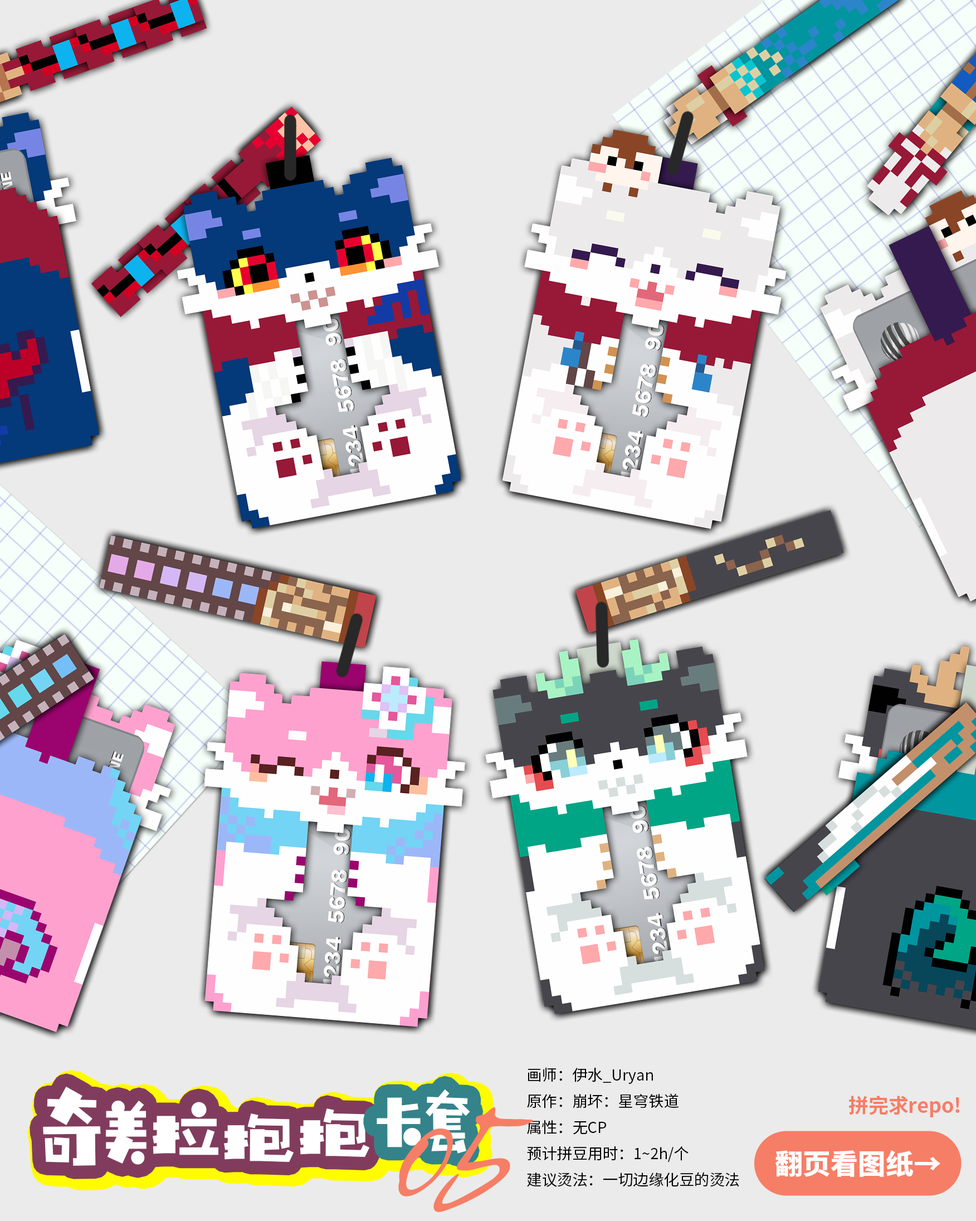
<style>
.page{position:relative;width:976px;height:1221px;background:#ebebeb}
.page>*{position:absolute;margin:0}
.t1{font:15.3px/26.1px "SourceHanSansCN-Regular";color:#000000}
.t2{font:87.6px "HYZhuZiTongNianTiW";color:#ffffff}
.t3{font:97.2px "HYZhuZiTongNianTiW";color:#ffffff}
.t4{font:86.1px "HYZhuZiTongNianTiW";color:#ffffff}
.t5{font:75.7px "HYZhuZiTongNianTiW";color:#ffffff}
.t6{font:20px "SourceHanSansCN-Bold";color:#f67e66}
.t7{font:127.8px "AllisonTessa-ExtraexpandedExtra";letter-spacing:-0.1em;color:#f67e66}
.t8{font:158.2px "AllisonTessa-ExtraexpandedExtra";letter-spacing:-0.1em;color:#f67e66}
.t9{font:27.7px "SourceHanSansCN-Heavy";color:#fffefe}
</style>
<div class="page">
<p class="t1" style="left:527px;top:1067px;width:213px;height:120px">画师：伊水_Uryan<br>原作：崩坏：星穹铁道<br>属性：无CP<br>预计拼豆用时：1~2h/个<br>建议烫法：一切边缘化豆的烫法</p>
<p class="t2" style="left:43px;top:1087px;width:327px;height:79px"><span class="t3">奇</span><span class="t4">美</span><span class="t3">拉</span>抱抱</p>
<p class="t5" style="left:377px;top:1089px;width:93px;height:65px">卡套</p>
<p class="t6" style="left:849px;top:1096px;width:111px;height:21px">拼完求repo!</p>
<p class="t7" style="left:399px;top:1107px;width:134px;height:105px">0<span class="t8">5</span></p>
<p class="t9" style="left:776px;top:1150px;width:165px;height:28px">翻页看图纸→</p>
</div>
